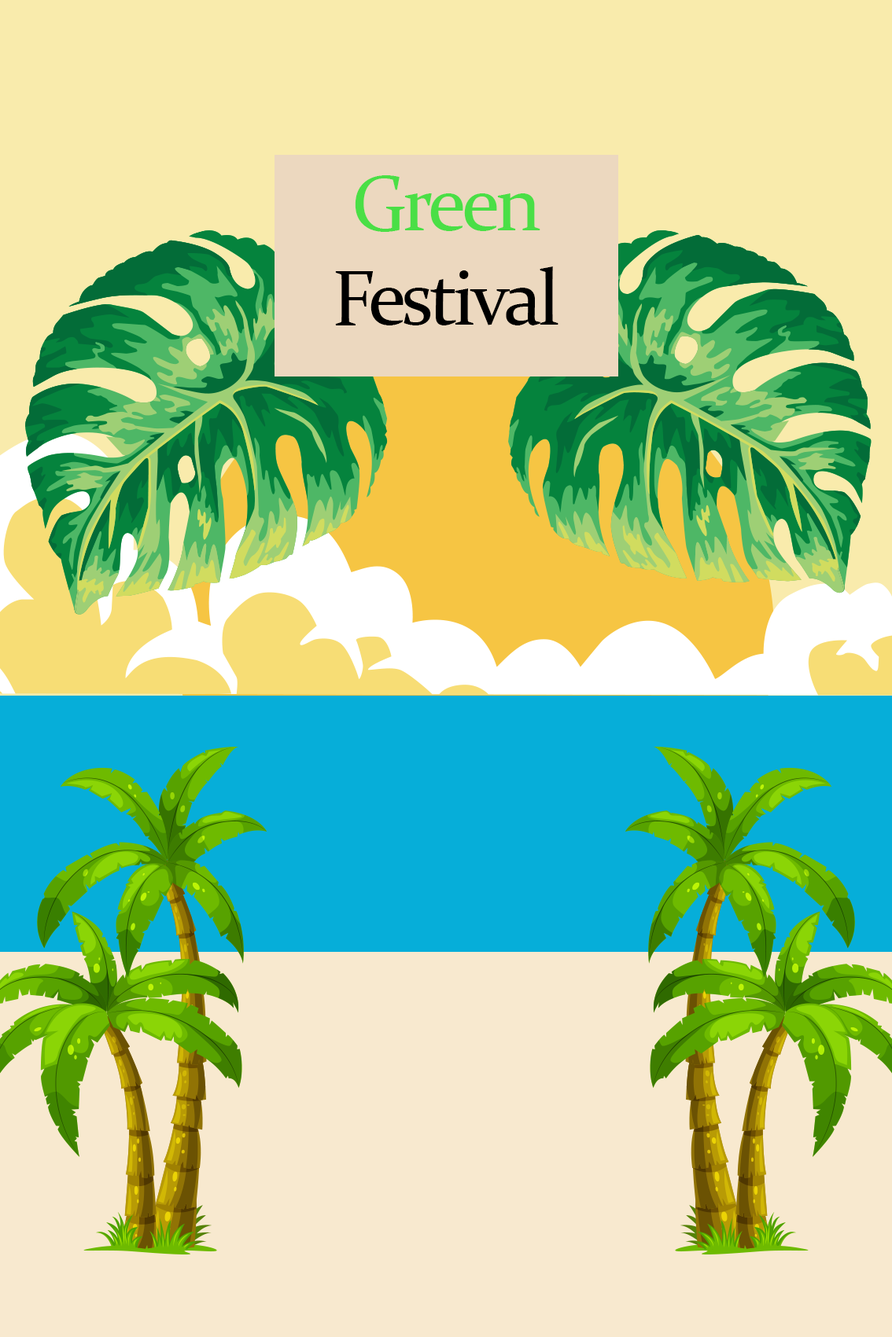
<style>
.page{position:relative;width:892px;height:1337px;background:#f8e9cf}
.page>*{position:absolute;margin:0}
.t1{font:78.6px "Constantia";letter-spacing:-0.05em;color:#000000}
.t2{font:78.6px "Constantia";letter-spacing:-0.05em;color:#4adf46}
</style>
<div class="page">
<p class="t1" style="left:335px;top:175px;width:223px;height:151px;text-align:center"><span class="t2">Green <br></span>Festival</p>
</div>
